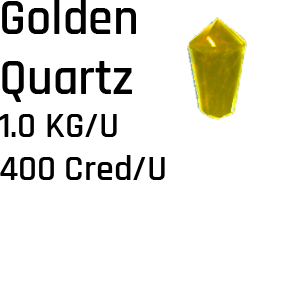
<style>
.page{position:relative;width:300px;height:283px;background:#ffffff}
.page>*{position:absolute;margin:0}
.t1{font:36px "Rajdhani-SemiBold";color:#000000}
.t2{font:50px "Rajdhani-SemiBold";color:#000000}
</style>
<div class="page">
<p class="t1" style="left:0px;top:0px;width:165px;height:180px"><span class="t2">Golden<br>Quartz<br></span>1.0 KG/U<br>400 Cred/U</p>
</div>
